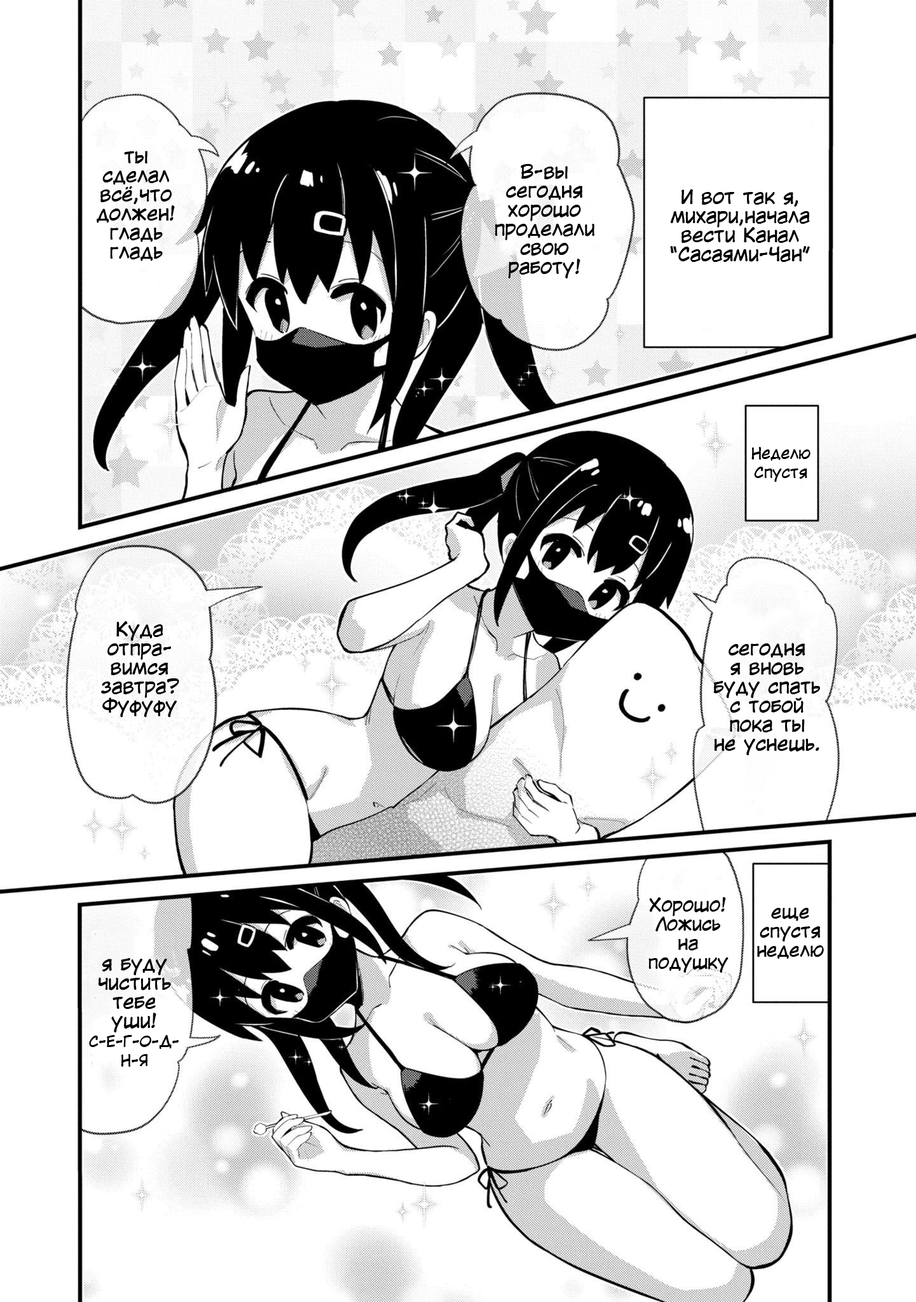
<style>
.page{position:relative;width:916px;height:1302px;background:#ffffff}
.page>*{position:absolute;margin:0}
.t1{font:19.1px/19.1px "KuraiVoice2";color:#000000}
.t2{font:15.3px/19.1px "KuraiVoice2";color:#000000}
.t3{font:17.8px/19.1px "KuraiVoice2";color:#000000}
</style>
<div class="page">
<p class="t1" style="left:97px;top:151px;width:78px;height:110px;text-align:center">ты<br>сделал<br>всё,что<br>должен!<br>гладь гладь</p>
<p class="t1" style="left:495px;top:164px;width:99px;height:114px;text-align:center">В-вы сегодня хорошо проделали свою работу!</p>
<p class="t1" style="left:670px;top:189px;width:140px;height:73px;text-align:center">И вот так я,<br>михари,начала<br>вести Канал<br>“Сасаями-Чан”</p>
<p class="t2" style="left:751px;top:447px;width:59px;height:35px;text-align:center">Неделю<br>Спустя</p>
<p class="t1" style="left:101px;top:621px;width:78px;height:96px;text-align:center">Куда отпра-<br>вимся завтра? <br>Фуфуфу</p>
<p class="t1" style="left:713px;top:643px;width:108px;height:112px;text-align:center">сегодня<br>я вновь буду спать с тобой пока ты<br>не уснешь.</p>
<p class="t3" style="left:648px;top:897px;width:80px;height:76px;text-align:center">Хорошо! Ложись на подушку</p>
<p class="t3" style="left:757px;top:907px;width:67px;height:52px;text-align:center">еще<br>спустя<br>неделю</p>
<p class="t1" style="left:89px;top:958px;width:90px;height:109px;text-align:center">я буду чистить тебе уши!<br><span class="t2">С-Е-Г-О-Д-Н-Я</span></p>
</div>
